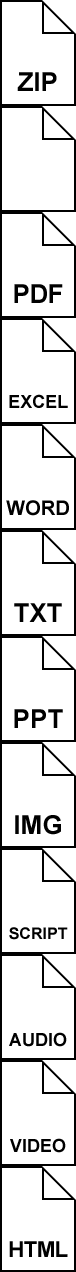
<style>
.page{position:relative;width:76px;height:1272px;background:#ffffff}
.page>*{position:absolute;margin:0}
.t1{font:26px "Arial-BoldMT";color:#000000}
.t2{font:26px "Arial-BoldMT";letter-spacing:-0.02em;color:#000000}
.t3{font:18px "Arial-BoldMT";color:#000000}
.t4{font:20px "Arial-BoldMT";color:#000000}
.t5{font:16px "Arial-BoldMT";color:#000000}
.t6{font:22px "Arial-BoldMT";letter-spacing:-0.02em;color:#000000}
</style>
<div class="page">
<p class="t1" style="left:17px;top:72px;width:40px;height:19px">ZIP</p>
<p class="t2" style="left:14px;top:284px;width:49px;height:19px">PDF</p>
<p class="t3" style="left:9px;top:394px;width:59px;height:14px">EXCEL</p>
<p class="t4" style="left:6px;top:500px;width:63px;height:16px">WORD</p>
<p class="t1" style="left:14px;top:603px;width:48px;height:19px">TXT</p>
<p class="t1" style="left:14px;top:709px;width:49px;height:19px">PPT</p>
<p class="t1" style="left:15px;top:815px;width:46px;height:20px">IMG</p>
<p class="t5" style="left:9px;top:927px;width:59px;height:13px">SCRIPT</p>
<p class="t3" style="left:9px;top:1032px;width:58px;height:15px">AUDIO</p>
<p class="t3" style="left:10px;top:1138px;width:56px;height:15px">VIDEO</p>
<p class="t6" style="left:9px;top:1241px;width:59px;height:16px">HTML</p>
</div>
